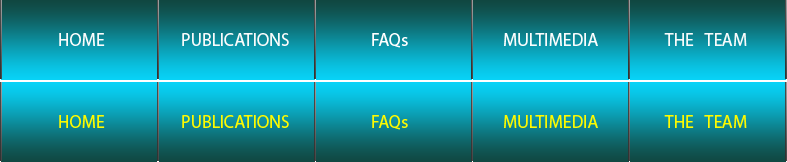
<style>
.page{position:relative;width:787px;height:162px}
.page>*{position:absolute;margin:0}
.t1{font:18px "MyriadPro-Regular";color:#fbfcfc}
.t2{font:18px "MyriadPro-Regular";color:#f9fbfb}
.t3{font:18px "MyriadPro-Regular";color:#ffffff}
.t4{font:18px "MyriadPro-Regular";color:#fbfdfd}
.t5{font:18px "MyriadPro-Regular";color:#f8fbfb}
.t6{font:18px "MyriadPro-Regular";color:#fdfa00}
</style>
<div class="page">
<p class="t1" style="left:59px;top:33px;width:46px;height:13px">HOME</p>
<p class="t2" style="left:182px;top:33px;width:107px;height:13px">PUBLICATIONS</p>
<p class="t3" style="left:372px;top:33px;width:36px;height:15px">FAQs</p>
<p class="t4" style="left:504px;top:33px;width:94px;height:13px">MULTIMEDIA</p>
<p class="t5" style="left:664px;top:33px;width:83px;height:13px">THE   TEAM</p>
<p class="t6" style="left:59px;top:115px;width:46px;height:13px">HOME</p>
<p class="t6" style="left:182px;top:115px;width:107px;height:13px">PUBLICATIONS</p>
<p class="t6" style="left:372px;top:115px;width:36px;height:15px">FAQs</p>
<p class="t6" style="left:504px;top:115px;width:94px;height:13px">MULTIMEDIA</p>
<p class="t6" style="left:664px;top:115px;width:83px;height:13px">THE   TEAM</p>
</div>
